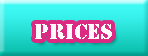
<style>
.page{position:relative;width:148px;height:56px}
.page>*{position:absolute;margin:0}
.t1{font:20px "StencilStd";color:#fcf6f6}
</style>
<div class="page">
<p class="t1" style="left:35px;top:24px;width:77px;height:15px">PRICES</p>
</div>
